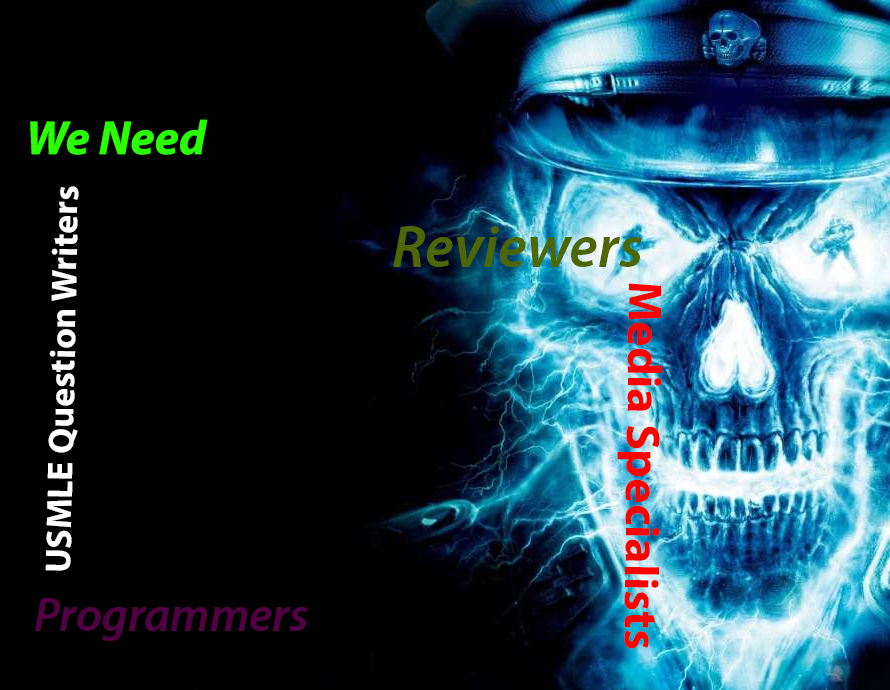
<style>
.page{position:relative;width:890px;height:690px;background:#000000}
.page>*{position:absolute;margin:0}
.t1{font:48px "MyriadPro-BoldIt";color:#2aff00}
.t2{font:36px "MyriadPro-Bold";color:#ffffff}
.t3{font:60px "MyriadPro-SemiboldIt";color:#4c6704}
.t4{font:48px "MyriadPro-Bold";color:#ff0000}
.t5{font:48px "MyriadPro-SemiboldIt";color:#520044}
</style>
<div class="page">
<p class="t1" style="left:30px;top:119px;width:178px;height:36px">We Need</p>
<p class="t2" style="left:45px;top:186px;width:34px;height:385px;rotate:-89deg">USMLE Question Writers</p>
<p class="t3" style="left:393px;top:226px;width:249px;height:41px">Reviewers</p>
<p class="t4" style="left:617px;top:283px;width:45px;height:366px;rotate:91deg">Media Specialists</p>
<p class="t5" style="left:35px;top:598px;width:273px;height:43px">Programmers</p>
</div>
